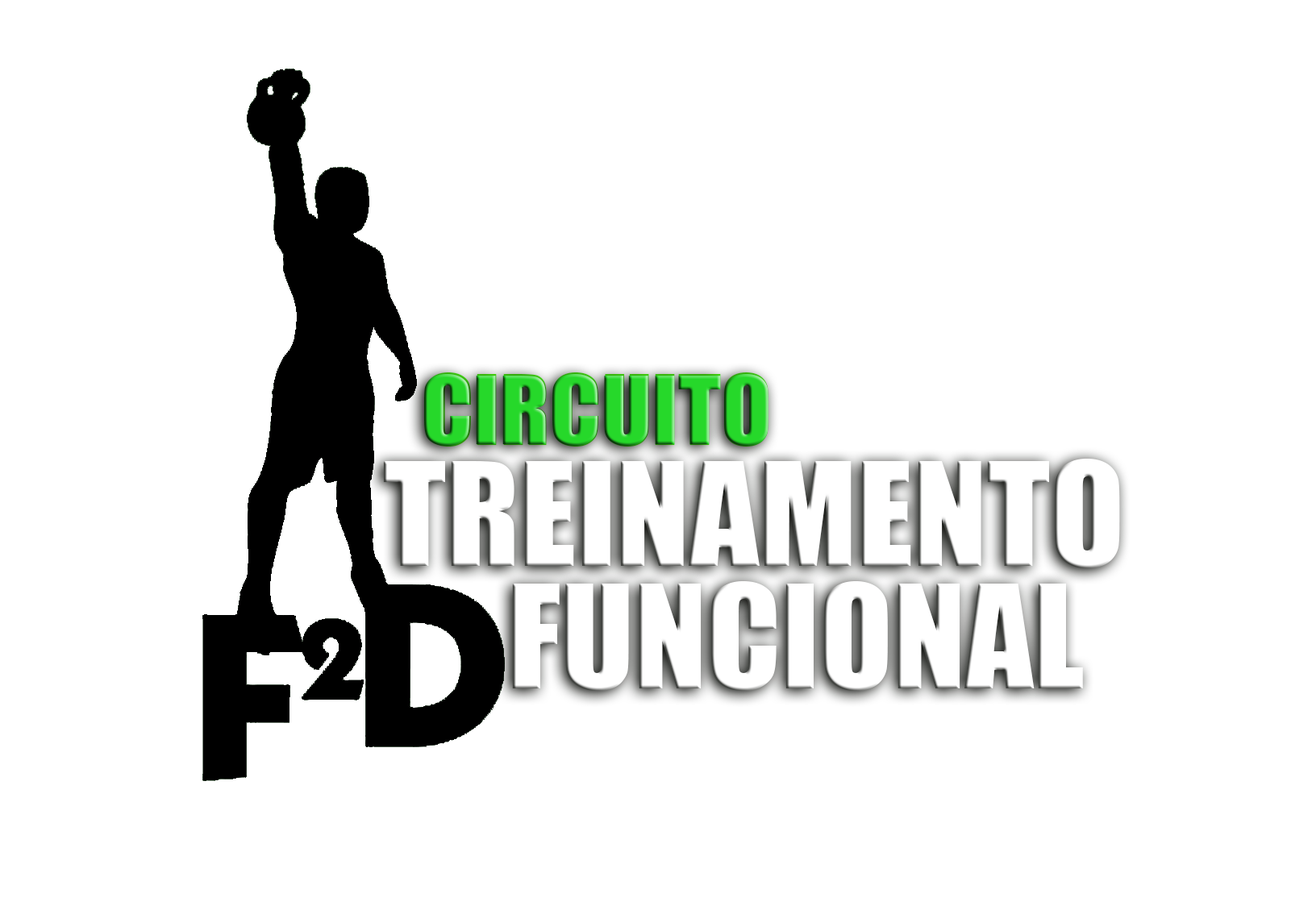
<style>
.page{position:relative;width:1316px;height:906px;background:#ffffff}
.page>*{position:absolute;margin:0}
.t1{font:86.8px "Impact";color:#26d82a;scale:1.07 1}
.t2{font:89.4px "Impact";scale:1.03 1}
.t3{font:133.4px "Impact";color:#ffffff}
</style>
<div class="page">
<p class="t1" style="left:424px;top:374px;width:344px;height:72px">CIRCUITO</p>
<p class="t2" style="left:426px;top:372px;width:342px;height:75px">CIRCUITO</p>
<p class="t3" style="left:383px;top:459px;width:737px;height:109px">TREINAMENTO</p>
<p class="t3" style="left:512px;top:581px;width:571px;height:110px">FUNCIONAL</p>
</div>
